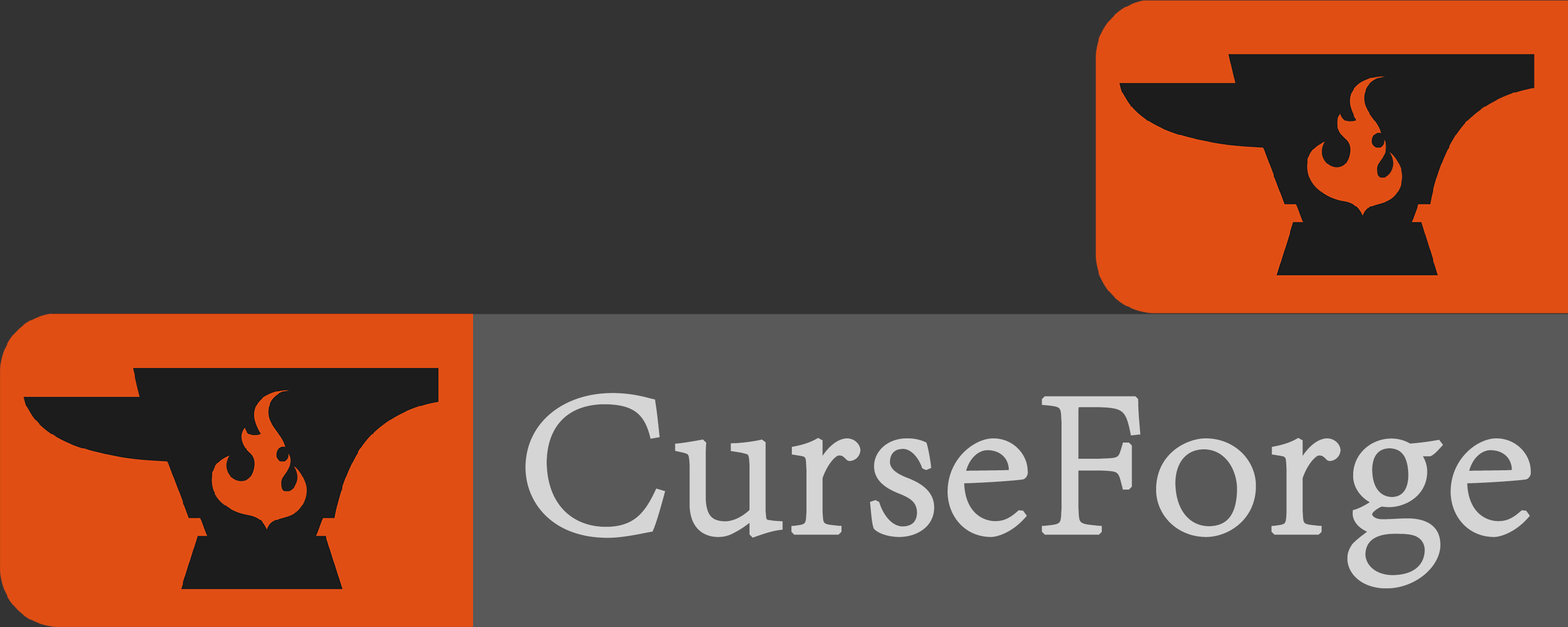
<style>
.page{position:relative;width:1568px;height:627px;background:#333333}
.page>*{position:absolute;margin:0}
.t1{font:211.8px "AdobeSongStd-Light";color:#d5d5d5;font-weight:bold}
</style>
<div class="page">
<p class="t1" style="left:525px;top:393px;width:1006px;height:196px">CurseForge</p>
</div>
